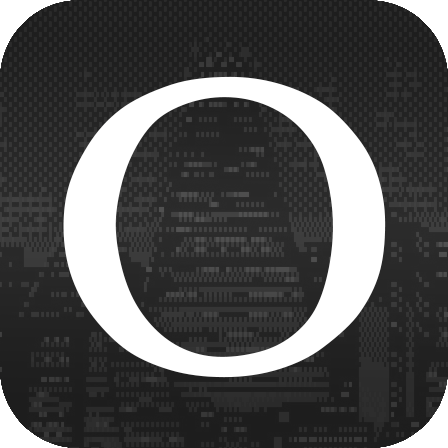
<style>
.page{position:relative;width:448px;height:448px}
.page>*{position:absolute;margin:0}
.t1{font:450.1px "Garamond";color:#ffffff;font-weight:bold}
</style>
<div class="page">
<p class="t1" style="left:63px;top:76px;width:323px;height:302px">O</p>
</div>
